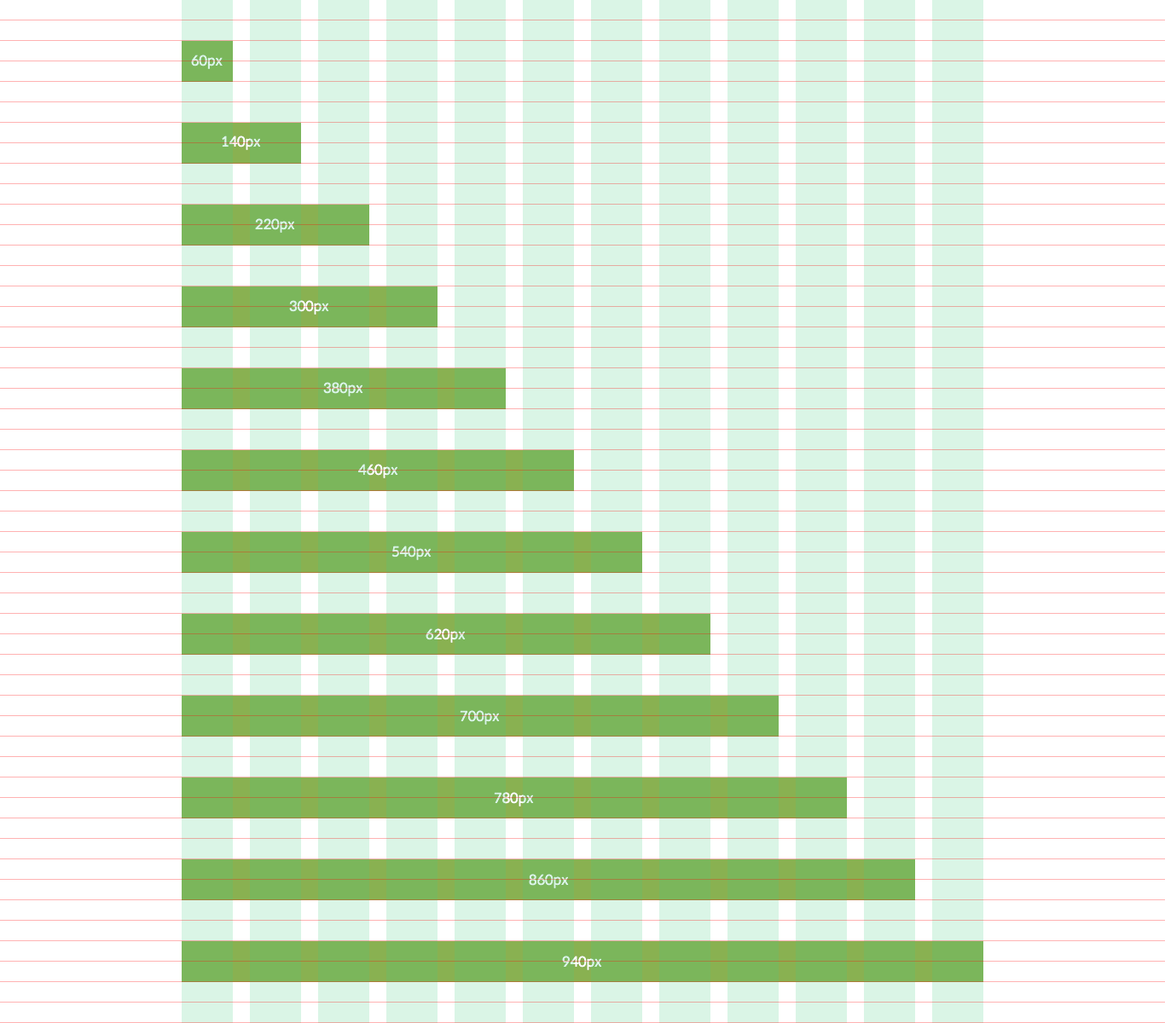
<style>
.page{position:relative;width:1165px;height:1023px;background:#ffffff}
.page>*{position:absolute;margin:0}
.t1{font:13.6px "SpoqaHanSans-Regular";letter-spacing:-0.005em;color:#daf5e6}
.t2{font:13.6px "SpoqaHanSans-Regular";letter-spacing:-0.005em}
</style>
<div class="page">
<p class="t1" style="left:191px;top:55px;width:32px;height:14px">60px</p>
<p class="t2" style="left:222px;top:136px;width:39px;height:14px">140px</p>
<p class="t1" style="left:255px;top:218px;width:40px;height:15px">220px</p>
<p class="t2" style="left:289px;top:300px;width:40px;height:15px">300px</p>
<p class="t1" style="left:323px;top:382px;width:40px;height:15px">380px</p>
<p class="t2" style="left:358px;top:464px;width:40px;height:14px">460px</p>
<p class="t1" style="left:391px;top:546px;width:41px;height:14px">540px</p>
<p class="t2" style="left:426px;top:629px;width:40px;height:14px">620px</p>
<p class="t1" style="left:460px;top:710px;width:40px;height:15px">700px</p>
<p class="t2" style="left:494px;top:792px;width:40px;height:15px">780px</p>
<p class="t1" style="left:529px;top:874px;width:40px;height:15px">860px</p>
<p class="t2" style="left:562px;top:956px;width:40px;height:15px">940px</p>
</div>
